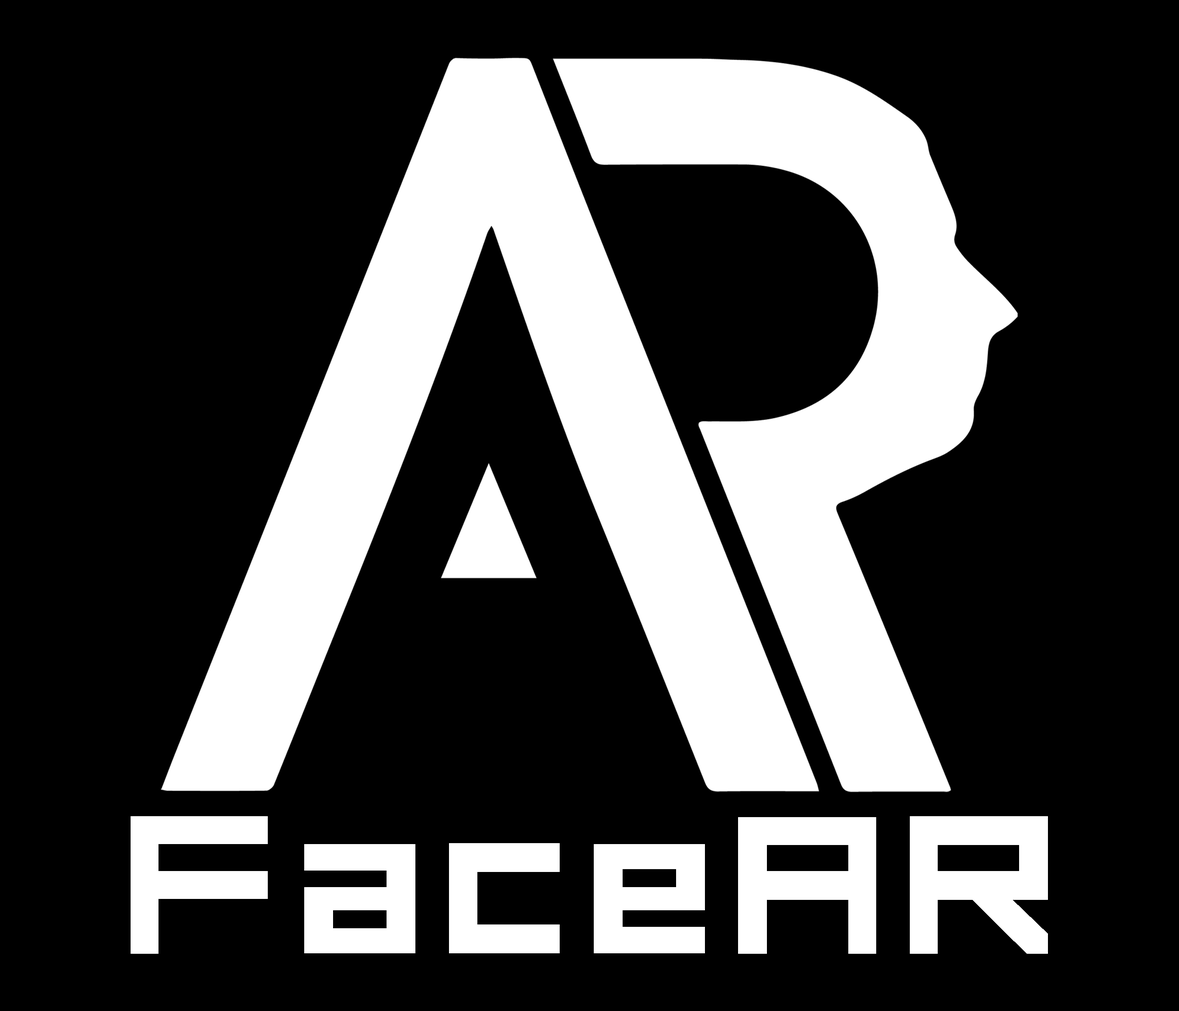
<style>
.page{position:relative;width:1179px;height:1011px;background:#000000}
.page>*{position:absolute;margin:0}
.t1{font:261.3px "FORCED-SQUARE";color:#ffffff;font-weight:bold}
</style>
<div class="page">
<p class="t1" style="left:131px;top:817px;width:917px;height:137px">FaceAR</p>
</div>
